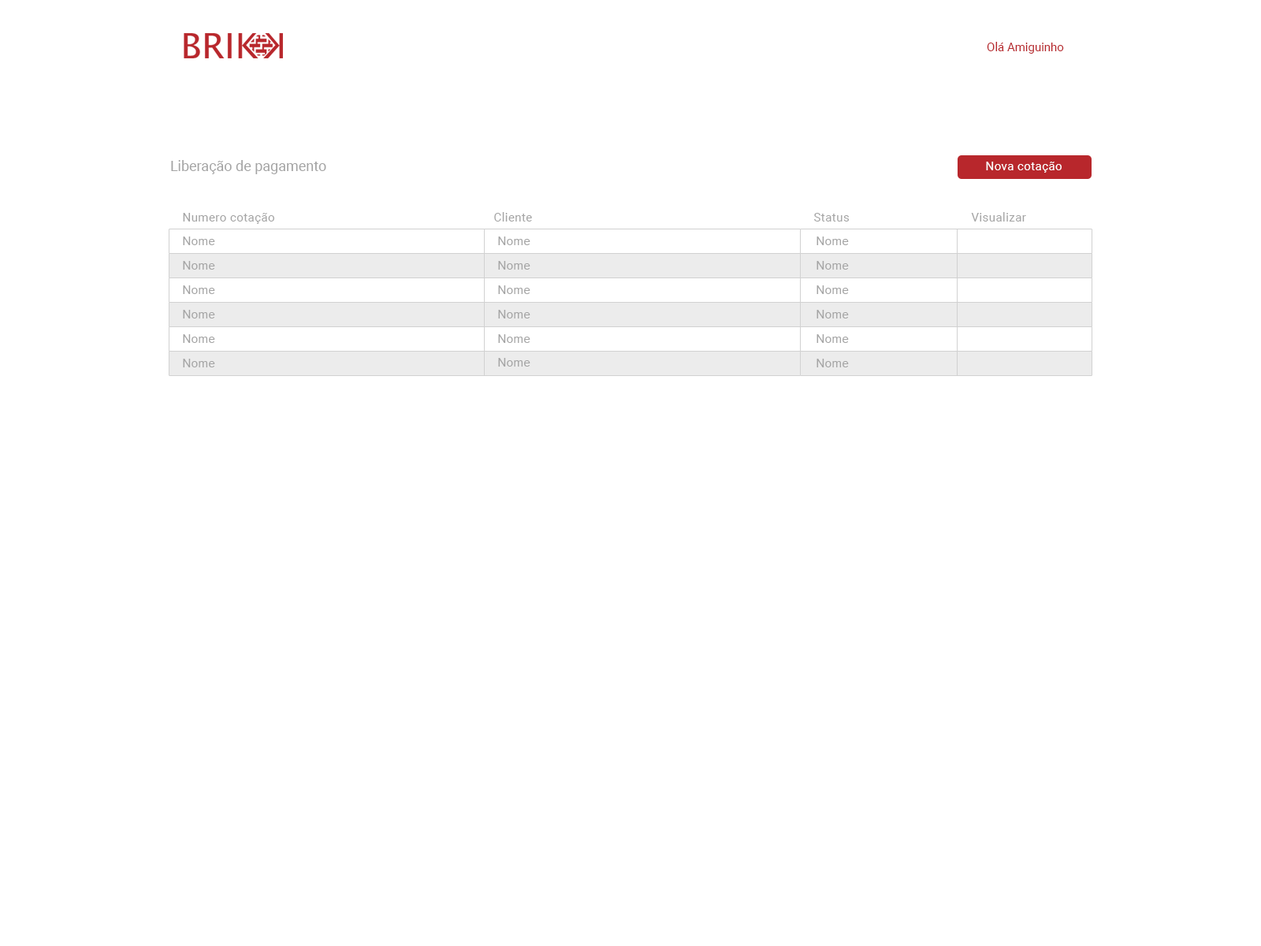
<style>
.page{position:relative;width:1261px;height:946px;background:#ffffff}
.page>*{position:absolute;margin:0}
.t1{font:11.8px "Roboto-Regular";color:#b8272c}
.t2{font:14.2px "Roboto-Regular";color:#a4a4a4}
.t3{font:11.8px "Roboto-Regular";letter-spacing:0.03em;color:#ffffff}
.t4{font:11.8px "Roboto-Regular";letter-spacing:0.03em;color:#a4a4a4}
.t5{font:11.8px "ArialMT";letter-spacing:0.03em;color:#a4a4a4}
</style>
<div class="page">
<p class="t1" style="left:987px;top:42px;width:77px;height:12px">Olá Amiguinho</p>
<p class="t2" style="left:171px;top:160px;width:155px;height:14px">Liberação de pagamento</p>
<p class="t3" style="left:986px;top:162px;width:76px;height:11px">Nova cotação</p>
<p class="t4" style="left:183px;top:213px;width:91px;height:11px">Numero cotação</p>
<p class="t4" style="left:494px;top:212px;width:38px;height:9px">Cliente</p>
<p class="t4" style="left:814px;top:213px;width:36px;height:8px">Status</p>
<p class="t4" style="left:971px;top:212px;width:55px;height:9px">Visualizar</p>
<p class="t5" style="left:183px;top:236px;width:32px;height:9px">Nome</p>
<p class="t5" style="left:498px;top:236px;width:32px;height:9px">Nome</p>
<p class="t5" style="left:816px;top:236px;width:33px;height:9px">Nome</p>
<p class="t5" style="left:183px;top:261px;width:32px;height:9px">Nome</p>
<p class="t5" style="left:498px;top:261px;width:32px;height:9px">Nome</p>
<p class="t5" style="left:816px;top:261px;width:33px;height:9px">Nome</p>
<p class="t5" style="left:183px;top:285px;width:32px;height:9px">Nome</p>
<p class="t5" style="left:498px;top:285px;width:32px;height:9px">Nome</p>
<p class="t5" style="left:816px;top:285px;width:33px;height:9px">Nome</p>
<p class="t5" style="left:183px;top:310px;width:32px;height:8px">Nome</p>
<p class="t5" style="left:498px;top:310px;width:32px;height:8px">Nome</p>
<p class="t5" style="left:816px;top:310px;width:33px;height:8px">Nome</p>
<p class="t5" style="left:183px;top:334px;width:32px;height:9px">Nome</p>
<p class="t5" style="left:498px;top:334px;width:32px;height:9px">Nome</p>
<p class="t5" style="left:816px;top:334px;width:33px;height:9px">Nome</p>
<p class="t5" style="left:183px;top:359px;width:32px;height:8px">Nome</p>
<p class="t5" style="left:498px;top:358px;width:32px;height:8px">Nome</p>
<p class="t5" style="left:816px;top:359px;width:33px;height:8px">Nome</p>
</div>
